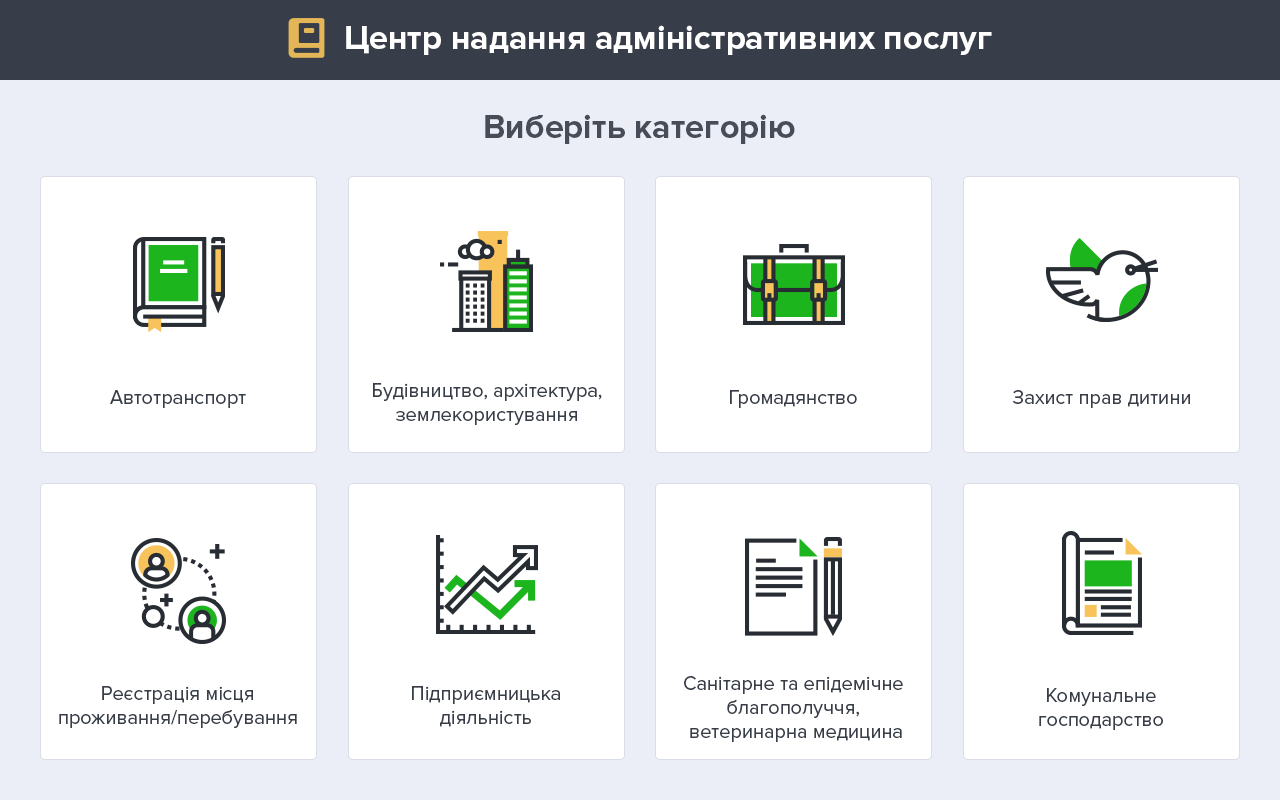
<style>
.page{position:relative;width:1280px;height:800px;background:#ffffff}
.page>*{position:absolute;margin:0}
.t1{font:34px "ProximaNova-Bold";color:#ffffff}
.t2{font:34px "ProximaNova-Bold";color:#474d58}
.t3{font:20px "ProximaNova-Regular";color:#383e49}
</style>
<div class="page">
<p class="t1" style="left:346px;top:25px;width:646px;height:30px">Центр надання адміністративних послуг</p>
<p class="t2" style="left:485px;top:114px;width:310px;height:30px">Виберіть категорію</p>
<p class="t3" style="left:110px;top:390px;width:136px;height:18px">Автотранспорт</p>
<p class="t3" style="left:373px;top:383px;width:229px;height:42px;text-align:center">Будівництво, архітектура,<br>землекористування</p>
<p class="t3" style="left:730px;top:390px;width:127px;height:18px">Громадянство</p>
<p class="t3" style="left:1012px;top:390px;width:178px;height:18px">Захист прав дитини</p>
<p class="t3" style="left:684px;top:676px;width:219px;height:66px;text-align:center">Санітарне та епідемічне <br>благополуччя, <br>ветеринарна медицина</p>
<p class="t3" style="left:59px;top:686px;width:238px;height:42px;text-align:center">Реєстрація місця<br>проживання/перебування</p>
<p class="t3" style="left:412px;top:686px;width:148px;height:41px;text-align:center">Підприємницька<br>діяльність</p>
<p class="t3" style="left:1039px;top:688px;width:124px;height:42px;text-align:center">Комунальне<br>господарство</p>
</div>
